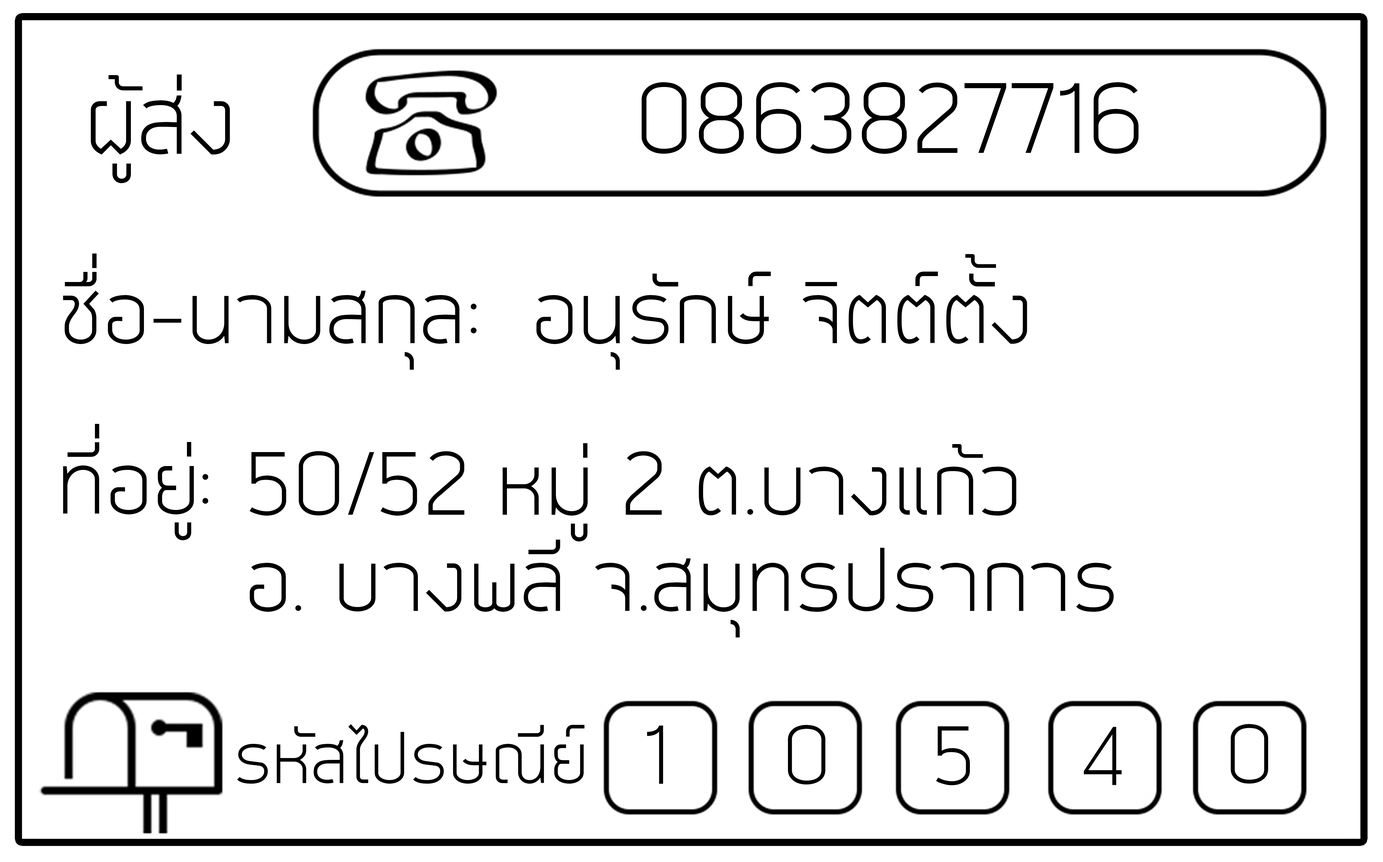
<style>
.page{position:relative;width:1383px;height:862px;background:#ffffff}
.page>*{position:absolute;margin:0}
.t1{font:89.1px "EkkamaiNew-Regular";color:#000000}
.t2{font:80.1px "EkkamaiNew-Regular";color:#000000}
.t3{font:74.2px "EkkamaiNew-Regular";color:#000000}
</style>
<div class="page">
<p class="t1" style="left:91px;top:75px;width:139px;height:108px">ผู้ส่ง</p>
<p class="t1" style="left:642px;top:82px;width:497px;height:72px">0863827716</p>
<p class="t2" style="left:63px;top:254px;width:414px;height:116px">ชื่อ-นามสกุล:</p>
<p class="t2" style="left:536px;top:254px;width:491px;height:116px">อนุรักษ์ จิตต์ตั้ง</p>
<p class="t2" style="left:63px;top:424px;width:145px;height:116px">ที่อยู่:</p>
<p class="t2" style="left:250px;top:443px;width:864px;height:195px">50/52 หมู่ 2 ต.บางแก้ว<br>อ. บางพลี จ.สมุทรปราการ</p>
<p class="t3" style="left:647px;top:725px;width:16px;height:59px">1</p>
<p class="t3" style="left:788px;top:725px;width:38px;height:60px">0</p>
<p class="t3" style="left:1231px;top:724px;width:37px;height:60px">0</p>
<p class="t3" style="left:936px;top:726px;width:34px;height:59px">5</p>
<p class="t3" style="left:1084px;top:727px;width:38px;height:58px">4</p>
</div>
